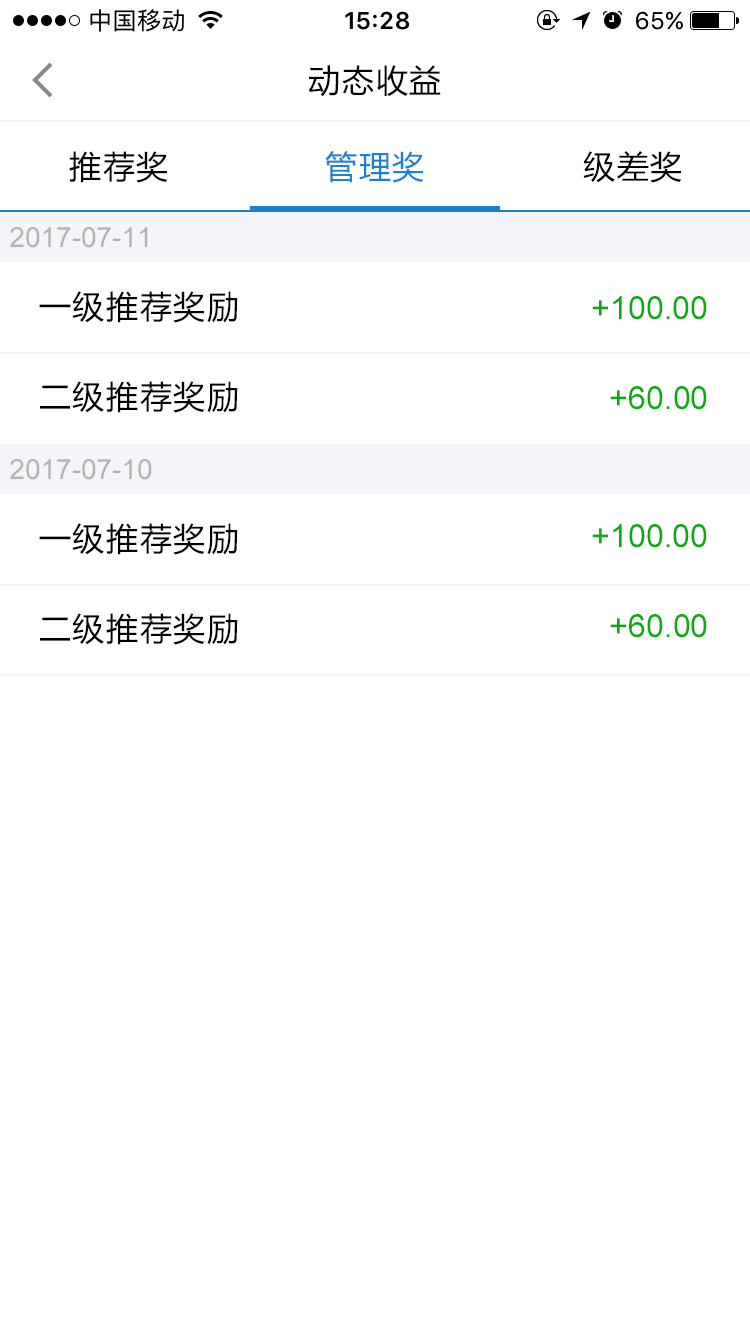
<style>
.page{position:relative;width:750px;height:1334px;background:#ffffff}
.page>*{position:absolute;margin:0}
.t1{font:32px "MicrosoftYaHei";letter-spacing:0.05em;color:#000000}
.t2{font:32px "MicrosoftYaHei";letter-spacing:0.05em;color:#1b82d2}
.t3{font:28px "ArialMT";color:#b3b3b3}
.t4{font:32px "ArialMT";color:#0da914}
</style>
<div class="page">
<p class="t1" style="left:308px;top:65px;width:133px;height:32px">动态收益</p>
<p class="t1" style="left:69px;top:151px;width:99px;height:32px">推荐奖</p>
<p class="t2" style="left:325px;top:151px;width:99px;height:32px">管理奖</p>
<p class="t1" style="left:583px;top:151px;width:99px;height:32px">级差奖</p>
<p class="t3" style="left:10px;top:227px;width:138px;height:21px">2017-07-11</p>
<p class="t1" style="left:39px;top:291px;width:199px;height:32px">一级推荐奖励</p>
<p class="t4" style="left:592px;top:296px;width:115px;height:24px">+100.00</p>
<p class="t1" style="left:40px;top:381px;width:198px;height:32px">二级推荐奖励</p>
<p class="t4" style="left:610px;top:386px;width:97px;height:24px">+60.00</p>
<p class="t3" style="left:10px;top:459px;width:142px;height:21px">2017-07-10</p>
<p class="t1" style="left:39px;top:523px;width:199px;height:32px">一级推荐奖励</p>
<p class="t4" style="left:592px;top:524px;width:115px;height:24px">+100.00</p>
<p class="t1" style="left:40px;top:613px;width:198px;height:32px">二级推荐奖励</p>
<p class="t4" style="left:610px;top:614px;width:97px;height:24px">+60.00</p>
</div>
